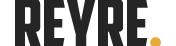
<style>
.page{position:relative;width:176px;height:46px;background:#252525}
.page>*{position:absolute;margin:0}
.t1{font:66.7px "AmericanCaptain";color:#252525}
.t2{font:66.7px "AmericanCaptain";color:#e7ab3c}
</style>
<div class="page">
<p class="t1" style="left:15px;top:0px;width:146px;height:48px">Reyre<span class="t2">.</span></p>
</div>
